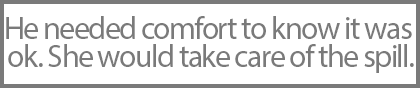
<style>
.page{position:relative;width:420px;height:88px;background:#ffffff}
.page>*{position:absolute;margin:0}
.t1{font:32px/28px "MyriadPro-Regular";letter-spacing:-0.05em;color:#7a7a7a}
</style>
<div class="page">
<p class="t1" style="left:6px;top:16px;width:408px;height:57px;text-align:center">He needed comfort to know it was <br>ok. She would take care of the spill.</p>
</div>
